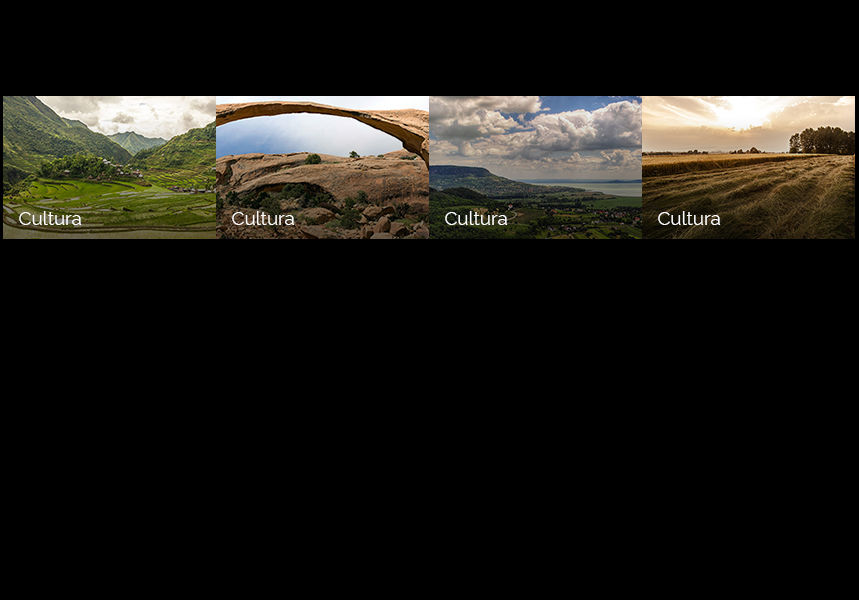
<style>
.page{position:relative;width:859px;height:600px;background:#000000}
.page>*{position:absolute;margin:0}
.t1{font:18.7px "Raleway-Regular";color:#ffffff}
</style>
<div class="page">
<p class="t1" style="left:19px;top:211px;width:63px;height:14px">Cultura</p>
<p class="t1" style="left:232px;top:211px;width:63px;height:14px">Cultura</p>
<p class="t1" style="left:445px;top:211px;width:63px;height:14px">Cultura</p>
<p class="t1" style="left:658px;top:211px;width:63px;height:14px">Cultura</p>
</div>
